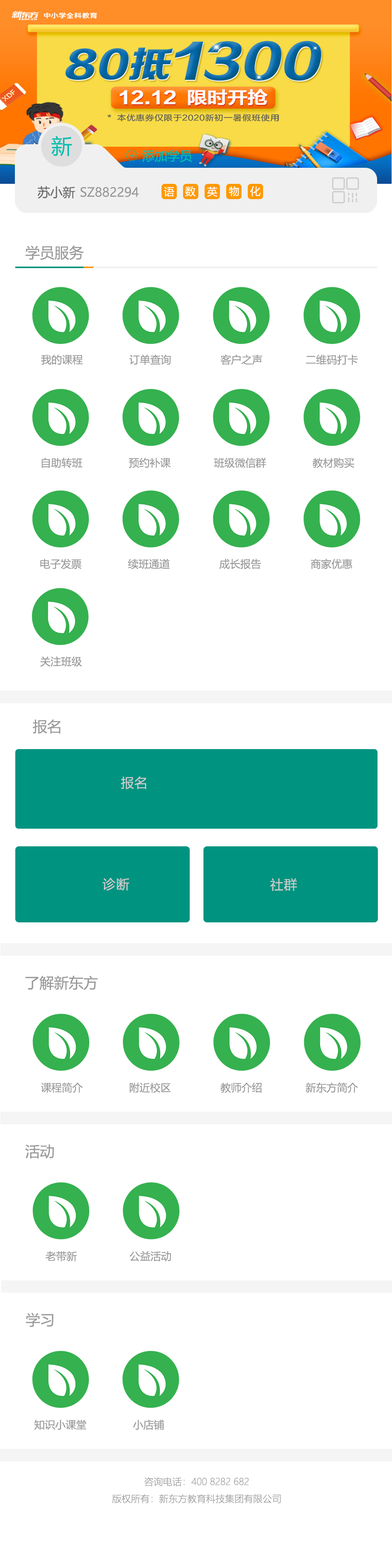
<style>
.page{position:relative;width:392px;height:1568px;background:#ffffff}
.page>*{position:absolute;margin:0}
.t1{font:20.9px "MicrosoftYaHei";color:#00bfaf}
.t2{font:12.5px "MicrosoftYaHei";color:#00bfaf}
.t3{font:9.8px "MicrosoftYaHei";color:#00bfaf}
.t4{font:12.5px "MicrosoftYaHei";color:#999999}
.t5{font:12.5px "MicrosoftYaHei";color:#666666}
.t6{font:10.5px "MicrosoftYaHei";color:#ffffff}
.t7{font:14.6px "MicrosoftYaHei";color:#999999}
.t8{font:10.5px "MicrosoftYaHei";color:#999999}
.t9{font:13.1px "MicrosoftYaHei";letter-spacing:0.05em;color:#cccccc}
.t10{font:9.4px/16.7px "MicrosoftYaHeiLight";color:#999999}
</style>
<div class="page">
<p class="t1" style="left:51px;top:136px;width:21px;height:20px">新</p>
<p class="t2" style="left:142px;top:150px;width:50px;height:12px">添加学员</p>
<p class="t3" style="left:129px;top:153px;width:5px;height:5px">+</p>
<p class="t4" style="left:38px;top:186px;width:101px;height:13px"><span class="t5">苏小新 </span>SZ882294</p>
<p class="t6" style="left:164px;top:187px;width:10px;height:10px">语</p>
<p class="t6" style="left:185px;top:186px;width:11px;height:11px">数</p>
<p class="t6" style="left:207px;top:187px;width:11px;height:10px">英</p>
<p class="t6" style="left:229px;top:186px;width:10px;height:10px">物</p>
<p class="t6" style="left:250px;top:186px;width:11px;height:10px">化</p>
<p class="t7" style="left:25px;top:245px;width:59px;height:15px">学员服务</p>
<p class="t8" style="left:41px;top:354px;width:317px;height:11px">我的课程               订单查询                客户之声              二维码打卡</p>
<p class="t8" style="left:42px;top:457px;width:312px;height:11px">自助转班               预约补课              班级微信群               教材购买</p>
<p class="t8" style="left:40px;top:559px;width:312px;height:10px">电子发票               续班通道                成长报告                商家优惠</p>
<p class="t8" style="left:40px;top:656px;width:42px;height:11px">关注班级</p>
<p class="t7" style="left:33px;top:719px;width:27px;height:15px">报名</p>
<p class="t9" style="left:121px;top:776px;width:25px;height:13px">报名</p>
<p class="t9" style="left:102px;top:878px;width:27px;height:13px">诊断</p>
<p class="t9" style="left:270px;top:878px;width:27px;height:13px">社群</p>
<p class="t7" style="left:25px;top:976px;width:73px;height:14px">了解新东方</p>
<p class="t8" style="left:41px;top:1082px;width:317px;height:11px">课程简介               附近校区                教师介绍              新东方简介</p>
<p class="t7" style="left:25px;top:1144px;width:29px;height:15px">活动</p>
<p class="t8" style="left:45px;top:1251px;width:126px;height:10px">老带新                 公益活动</p>
<p class="t7" style="left:26px;top:1313px;width:28px;height:14px">学习</p>
<p class="t8" style="left:34px;top:1419px;width:130px;height:11px">知识小课堂               小店铺</p>
<p class="t10" style="left:112px;top:1477px;width:169px;height:26px;text-align:center">咨询电话：400 8282 682<br>版权所有：新东方教育科技集团有限公司</p>
</div>
